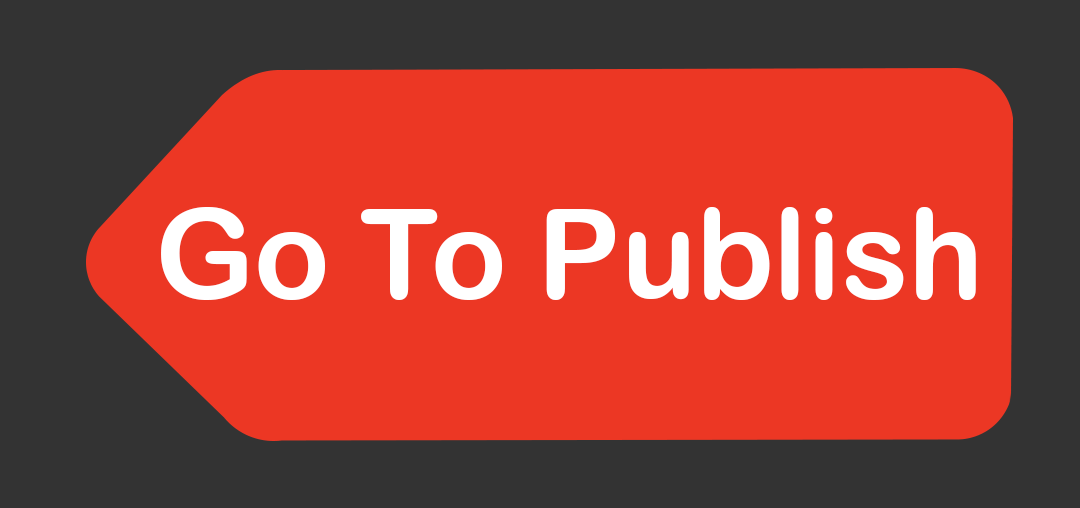
<style>
.page{position:relative;width:1080px;height:508px;background:#ec3724}
.page>*{position:absolute;margin:0}
.t1{font:125px "ArialRoundedMTBold";color:#ffffff}
</style>
<div class="page">
<p class="t1" style="left:161px;top:207px;width:815px;height:93px">Go To Publish</p>
</div>
